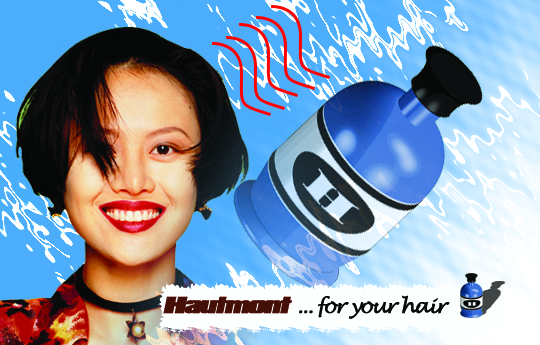
<style>
.page{position:relative;width:540px;height:345px}
.page>*{position:absolute;margin:0}
.t1{font:20px "LucidaHandwriting-Italic";letter-spacing:-0.1em;color:#060808;font-weight:bold}
.t2{font:20px "PadalomaItalic";letter-spacing:-0.1em;color:#440f06;font-weight:bold}
</style>
<div class="page">
<p class="t1" style="left:163px;top:295px;width:287px;height:24px"><span class="t2">Hautmont </span>... for your hair</p>
</div>
